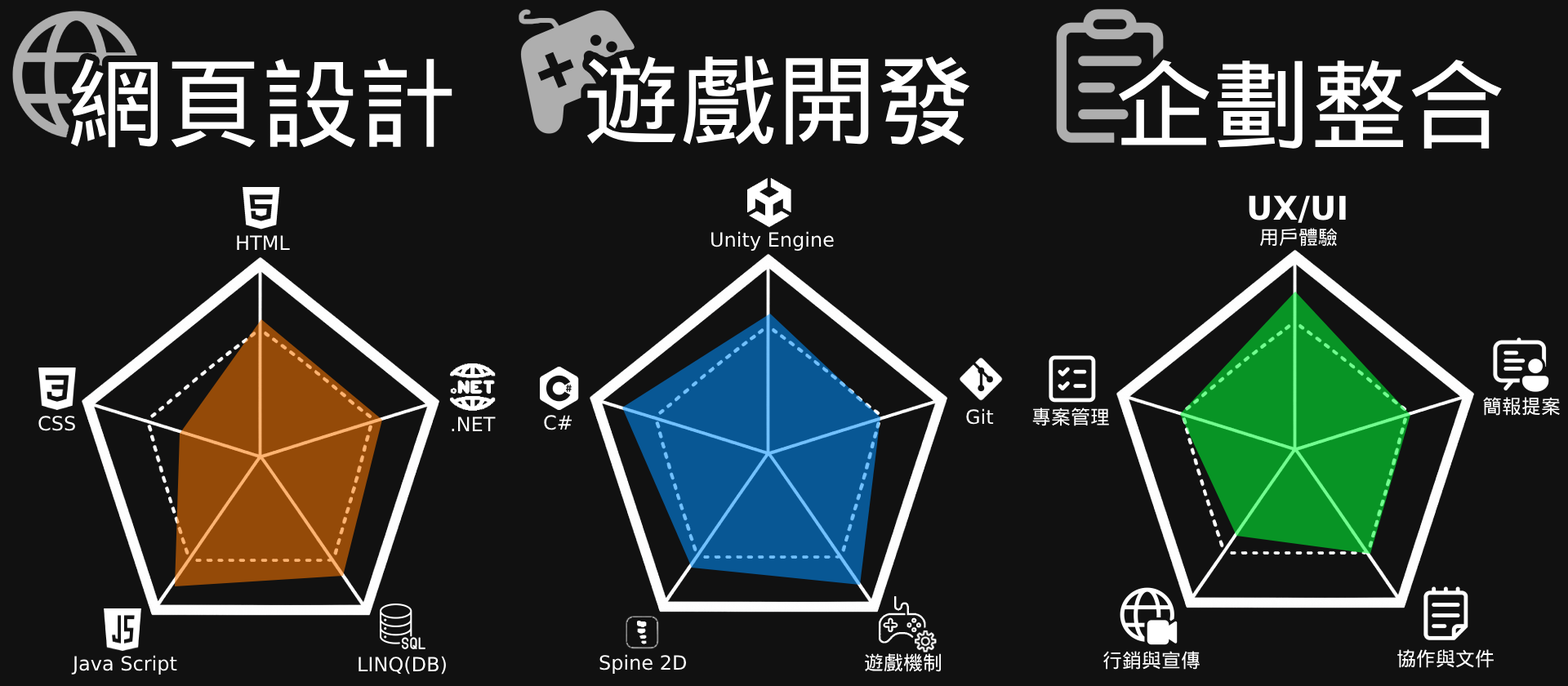
<style>
.page{position:relative;width:1568px;height:686px;background:#111111}
.page>*{position:absolute;margin:0}
.t1{font:97.7px "DroidSansFallback";color:#ffffff}
.t2{font:32.7px "DejaVuSans-Bold";color:#ffffff}
.t3{font:19.6px "DejaVuSans";color:#ffffff}
.t4{font:19.6px "DroidSansFallback";color:#ffffff}
</style>
<div class="page">
<p class="t1" style="left:71px;top:58px;width:381px;height:90px">網頁設計</p>
<p class="t1" style="left:587px;top:56px;width:382px;height:89px">遊戲開發</p>
<p class="t1" style="left:1119px;top:59px;width:383px;height:90px">企劃整合</p>
<p class="t2" style="left:1249px;top:195px;width:97px;height:28px">UX/UI</p>
<p class="t3" style="left:711px;top:231px;width:123px;height:20px">Unity Engine</p>
<p class="t4" style="left:1260px;top:228px;width:78px;height:19px">用戶體驗</p>
<p class="t3" style="left:237px;top:235px;width:53px;height:15px">HTML</p>
<p class="t4" style="left:1483px;top:397px;width:77px;height:19px">簡報提案</p>
<p class="t3" style="left:966px;top:408px;width:28px;height:17px">Git</p>
<p class="t4" style="left:1032px;top:408px;width:77px;height:18px">專案管理</p>
<p class="t3" style="left:38px;top:416px;width:37px;height:15px">CSS</p>
<p class="t3" style="left:452px;top:416px;width:44px;height:15px">.NET</p>
<p class="t3" style="left:544px;top:415px;width:28px;height:15px">C#</p>
<p class="t4" style="left:865px;top:653px;width:77px;height:19px">遊戲機制</p>
<p class="t4" style="left:1103px;top:651px;width:97px;height:19px">行銷與宣傳</p>
<p class="t4" style="left:1397px;top:649px;width:97px;height:19px">協作與文件</p>
<p class="t3" style="left:71px;top:655px;width:106px;height:20px">Java Script</p>
<p class="t3" style="left:359px;top:656px;width:87px;height:19px">LINQ(DB)</p>
<p class="t3" style="left:599px;top:654px;width:88px;height:20px">Spine 2D</p>
</div>
